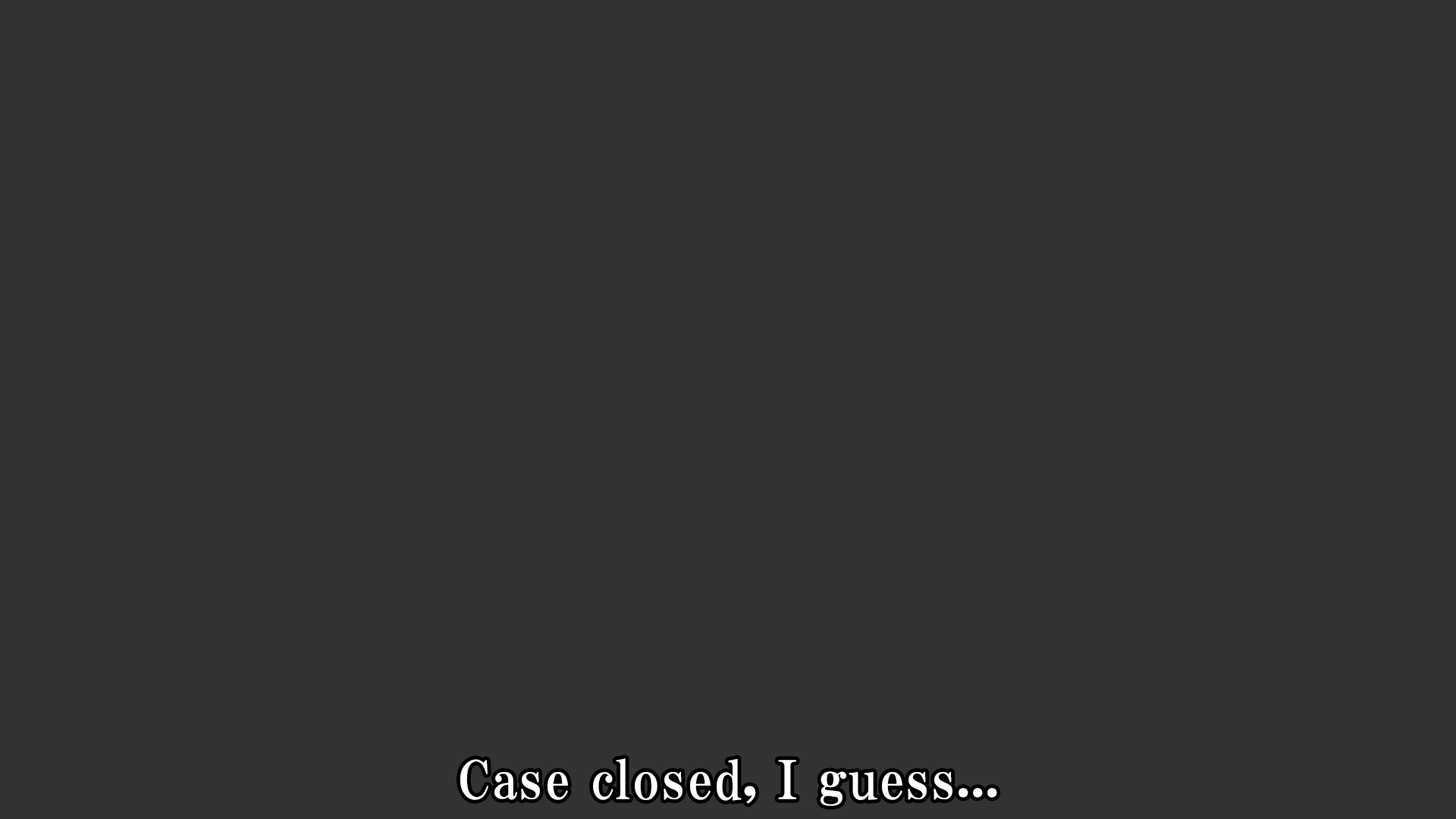
<style>
.page{position:relative;width:1456px;height:819px;background:#333333}
.page>*{position:absolute;margin:0}
.t1{font:53.1px "HGPMinchoE";letter-spacing:0.025em;color:#ffffff}
</style>
<div class="page">
<p class="t1" style="left:460px;top:758px;width:537px;height:48px">Case closed, I guess...</p>
</div>
